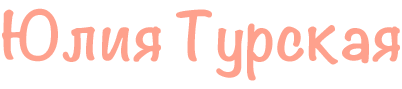
<style>
.page{position:relative;width:402px;height:89px;background:#ffffff}
.page>*{position:absolute;margin:0}
.t1{font:60px "Noteworthy-Bold";color:#fea18d}
</style>
<div class="page">
<p class="t1" style="left:2px;top:8px;width:398px;height:73px">Юлия Турская</p>
</div>
